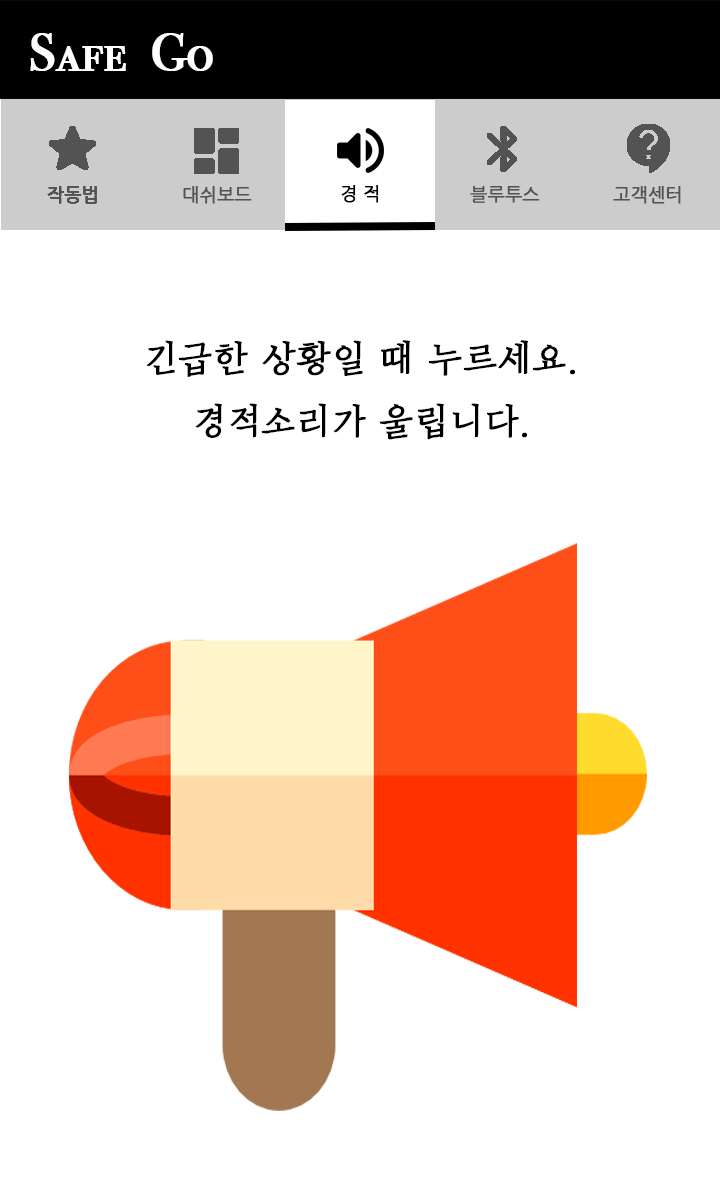
<style>
.page{position:relative;width:720px;height:1200px;background:#ffffff}
.page>*{position:absolute;margin:0}
.t1{font:53px "BodoniSvtyTwoSCITCTT-Book";color:#ffffff;font-weight:bold}
.t2{font:18px "NanumGothic";color:#000000;font-weight:bold}
.t3{font:18px "NanumGothic";color:#535353;font-weight:bold}
.t4{font:36px "DXSnUStd-B";color:#000000;font-weight:bold}
</style>
<div class="page">
<p class="t1" style="left:30px;top:33px;width:183px;height:38px">Safe  Go</p>
<p class="t2" style="left:341px;top:185px;width:38px;height:18px">경 적</p>
<p class="t3" style="left:47px;top:186px;width:50px;height:18px">작동법</p>
<p class="t4" style="left:146px;top:340px;width:429px;height:100px;text-align:center">긴급한 상황일 때 누르세요.<br>경적소리가 울립니다.</p>
</div>
